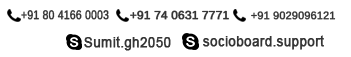
<style>
.page{position:relative;width:351px;height:57px;background:#ffffff}
.page>*{position:absolute;margin:0}
.t1{font:12.4px "Arimo";color:#353535;font-weight:bold;scale:0.83 1}
.t2{font:11.6px "Arimo";color:#353535;font-weight:bold}
.t3{font:10.7px "Arimo";color:#353535;font-weight:bold}
.t4{font:13.5px "ArialMT";color:#353535;font-weight:bold}
</style>
<div class="page">
<p class="t1" style="left:21px;top:10px;width:88px;height:10px">+91 80 4166 0003</p>
<p class="t2" style="left:130px;top:10px;width:99px;height:10px">+91 74 0631 7771</p>
<p class="t3" style="left:251px;top:11px;width:85px;height:9px">+91 9029096121</p>
<p class="t4" style="left:84px;top:36px;width:87px;height:15px">Sumit.gh2050</p>
<p class="t4" style="left:203px;top:35px;width:121px;height:15px">socioboard.support</p>
</div>
